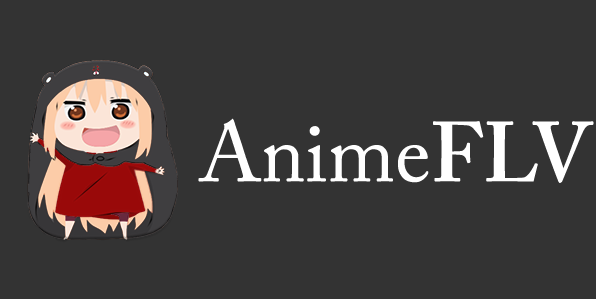
<style>
.page{position:relative;width:596px;height:299px;background:#333333}
.page>*{position:absolute;margin:0}
.t1{font:84px "ACaslonPro-Regular";color:#ffffff}
.t2{font:84px "ACaslonPro-Semibold";color:#ffffff}
</style>
<div class="page">
<p class="t1" style="left:198px;top:118px;width:396px;height:65px">Anime<span class="t2">FLV</span></p>
</div>
